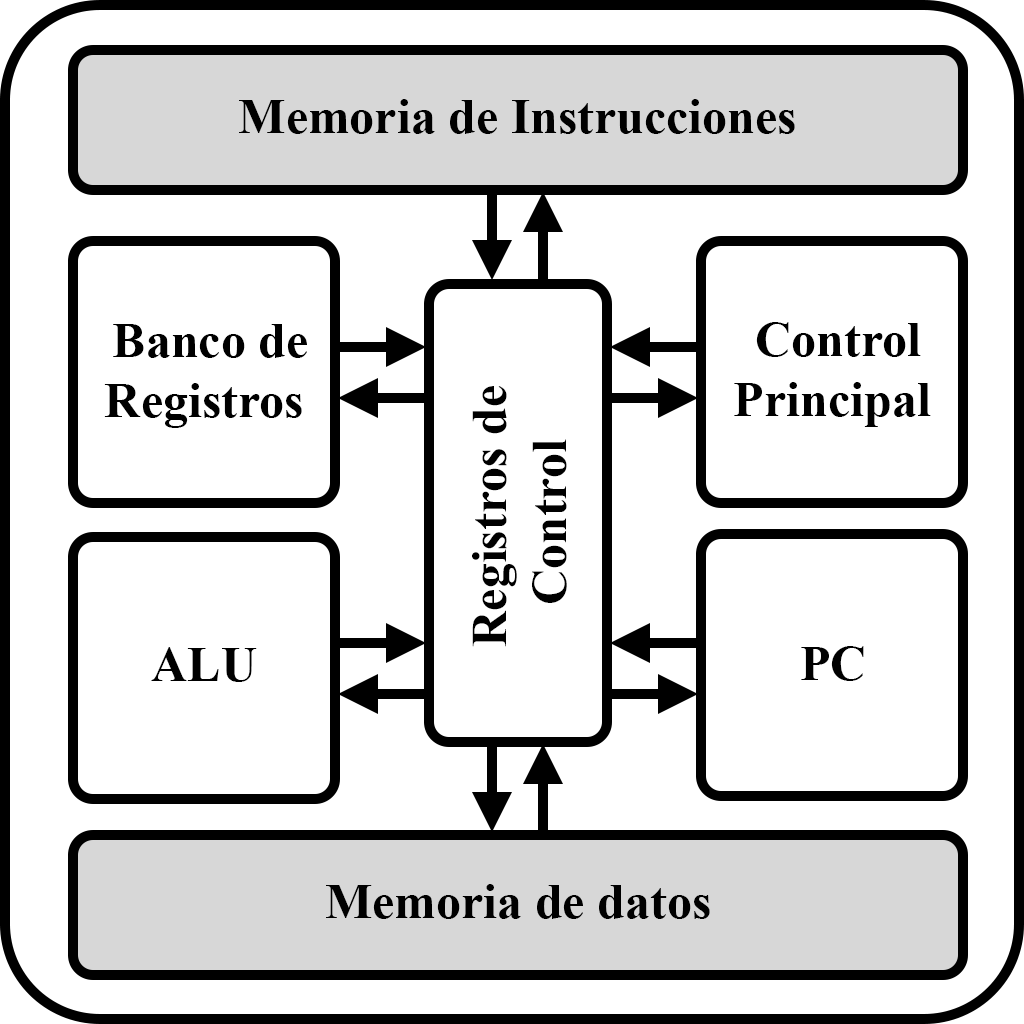
<style>
.page{position:relative;width:1024px;height:1024px;background:#ffffff}
.page>*{position:absolute;margin:0}
.t1{font:50px "TimesNewRomanPS-BoldMT";color:#000000}
</style>
<div class="page">
<p class="t1" style="left:239px;top:99px;width:556px;height:35px">Memoria de Instrucciones</p>
<p class="t1" style="left:104px;top:324px;width:203px;height:104px;text-align:center">Banco de <br>Registros</p>
<p class="t1" style="left:734px;top:322px;width:197px;height:105px;text-align:center">Control <br>Principal</p>
<p class="t1" style="left:472px;top:386px;width:95px;height:261px;text-align:center;rotate:-90deg">Registros de <br>Control</p>
<p class="t1" style="left:151px;top:647px;width:106px;height:35px">ALU</p>
<p class="t1" style="left:801px;top:646px;width:63px;height:35px">PC</p>
<p class="t1" style="left:326px;top:884px;width:384px;height:35px">Memoria de datos</p>
</div>
